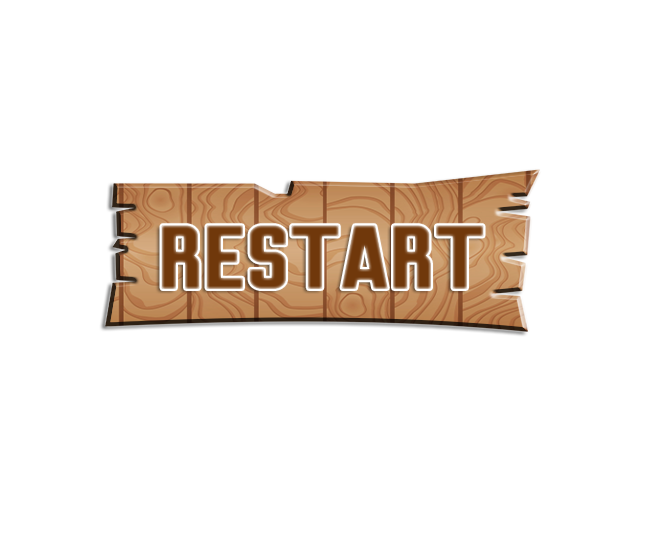
<style>
.page{position:relative;width:650px;height:536px;background:#ffffff}
.page>*{position:absolute;margin:0}
.t1{font:70px "BrewmasterGothicRound";color:#70380b;scale:1.26 1}
</style>
<div class="page">
<p class="t1" style="left:161px;top:225px;width:323px;height:64px">restart</p>
</div>
